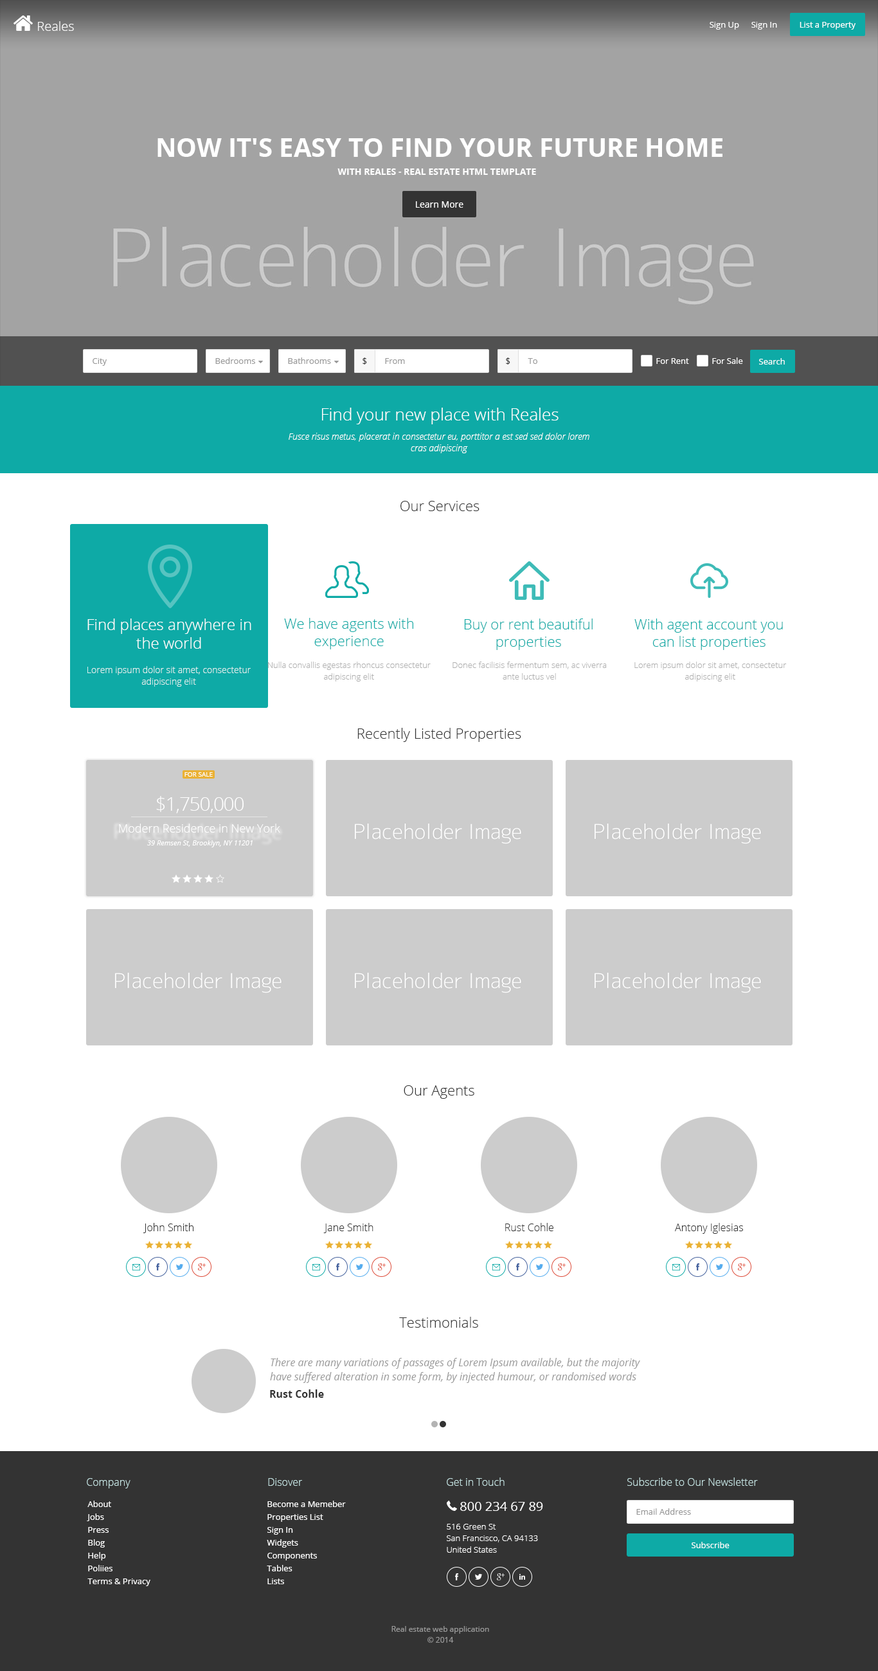
<style>
.page{position:relative;width:878px;height:1671px;background:#ffffff}
.page>*{position:absolute;margin:0}
.t1{font:12.9px "OpenSans-Light";color:#ffffff}
.t2{font:8.4px "OpenSans";color:#ffffff}
.t3{font:25.7px "OpenSans-Bold";color:#ffffff}
.t4{font:9px "OpenSans-Bold";color:#ffffff}
.t5{font:9px "OpenSans";color:#ffffff}
.t6{font:8.4px "OpenSans";color:#999999}
.t7{font:8.4px "OpenSans";color:#333333}
.t8{font:16.7px "OpenSans-Light";color:#ffffff}
.t9{font:9px/11.6px "OpenSansLight-Italic";color:#ffffff}
.t10{font:14.1px "OpenSans-Light";color:#333333}
.t11{font:14.1px "OpenSans-Light";color:#0eaaa6}
.t12{font:15.4px "OpenSans-Light";color:#ffffff}
.t13{font:8.4px/11.6px "OpenSans-Light";color:#999999}
.t14{font:9px/11.6px "OpenSans-Light";color:#def0ef}
.t15{font:6.4px "OpenSans";color:#ffffff}
.t16{font:19.3px "OpenSans-Light";letter-spacing:-0.04em;color:#ffffff}
.t17{font:11.6px "OpenSans-Light";color:#ffffff}
.t18{font:7.1px "OpenSans-Italic";color:#ffffff}
.t19{font:10.3px "OpenSans-Light";color:#333333}
.t20{font:10.3px/14.1px "OpenSans-Italic";color:#999999}
.t21{font:10.3px "OpenSans-Bold";color:#333333}
.t22{font:10.3px "OpenSans-Light";color:#c6e4e3}
.t23{font:8.4px/12.9px "OpenSans";color:#ffffff}
.t24{font:12.9px "OpenSans";color:#ffffff}
.t25{font:8.4px/11.6px "OpenSans-Light";color:#ffffff}
.t26{font:7.7px/10.9px "OpenSans";color:#999999}
</style>
<div class="page">
<p class="t1" style="left:38px;top:21px;width:36px;height:10px">Reales</p>
<p class="t2" style="left:710px;top:22px;width:29px;height:8px">Sign Up</p>
<p class="t2" style="left:752px;top:22px;width:25px;height:8px">Sign In</p>
<p class="t2" style="left:800px;top:22px;width:56px;height:8px">List a Property</p>
<p class="t3" style="left:158px;top:138px;width:565px;height:19px">NOW IT'S EASY TO FIND YOUR FUTURE HOME</p>
<p class="t4" style="left:338px;top:168px;width:198px;height:7px">WITH REALES - REAL ESTATE HTML TEMPLATE</p>
<p class="t5" style="left:416px;top:201px;width:48px;height:7px">Learn More</p>
<p class="t6" style="left:93px;top:358px;width:14px;height:8px">City</p>
<p class="t6" style="left:215px;top:357px;width:40px;height:7px">Bedrooms</p>
<p class="t6" style="left:288px;top:357px;width:43px;height:7px">Bathrooms</p>
<p class="t7" style="left:363px;top:357px;width:4px;height:7px">$</p>
<p class="t6" style="left:385px;top:358px;width:20px;height:6px">From</p>
<p class="t7" style="left:506px;top:357px;width:4px;height:7px">$</p>
<p class="t6" style="left:528px;top:358px;width:9px;height:6px">To</p>
<p class="t2" style="left:656px;top:358px;width:33px;height:6px">For Rent</p>
<p class="t2" style="left:712px;top:357px;width:31px;height:7px">For Sale</p>
<p class="t2" style="left:759px;top:358px;width:26px;height:6px">Search</p>
<p class="t8" style="left:322px;top:408px;width:237px;height:16px">Find your new place with Reales</p>
<p class="t9" style="left:289px;top:433px;width:301px;height:20px;text-align:center">Fusce risus metus, placerat in consectetur eu, porttitor a est sed sed dolor lorem cras adipiscing</p>
<p class="t10" style="left:401px;top:501px;width:79px;height:10px">Our Services</p>
<p class="t11" style="left:284px;top:618px;width:129px;height:31px;text-align:center">We have agents with<br>experience</p>
<p class="t12" style="left:87px;top:618px;width:164px;height:31px;text-align:center">Find places anywhere in<br>the world</p>
<p class="t11" style="left:464px;top:618px;width:129px;height:32px;text-align:center">Buy or rent beautiful<br>properties</p>
<p class="t11" style="left:634px;top:618px;width:149px;height:32px;text-align:center">With agent account you<br>can list properties</p>
<p class="t13" style="left:267px;top:662px;width:164px;height:19px;text-align:center;opacity:0.8">Nulla convallis egestas rhoncus consectetur<br>adipiscing elit</p>
<p class="t13" style="left:453px;top:662px;width:154px;height:18px;text-align:center;opacity:0.8">Donec facilisis fermentum sem, ac viverra<br>ante luctus vel</p>
<p class="t13" style="left:634px;top:662px;width:153px;height:19px;text-align:center;opacity:0.8">Lorem ipsum dolor sit amet, consectetur<br>adipiscing elit</p>
<p class="t14" style="left:87px;top:666px;width:164px;height:21px;text-align:center">Lorem ipsum dolor sit amet, consectetur<br>adipiscing elit</p>
<p class="t10" style="left:357px;top:728px;width:164px;height:14px">Recently Listed Properties</p>
<p class="t15" style="left:184px;top:772px;width:29px;height:5px">FOR SALE</p>
<p class="t16" style="left:156px;top:796px;width:88px;height:17px">$1,750,000</p>
<p class="t17" style="left:119px;top:824px;width:161px;height:9px">Modern Residence in New York</p>
<p class="t18" style="left:147px;top:840px;width:106px;height:7px">39 Remsen St, Brooklyn, NY 11201</p>
<p class="t10" style="left:404px;top:1085px;width:70px;height:14px">Our Agents</p>
<p class="t19" style="left:143px;top:1223px;width:51px;height:10px">John Smith</p>
<p class="t19" style="left:323px;top:1223px;width:51px;height:10px">Jane Smith</p>
<p class="t19" style="left:505px;top:1223px;width:49px;height:8px">Rust Cohle</p>
<p class="t19" style="left:675px;top:1223px;width:68px;height:11px">Antony Iglesias</p>
<p class="t10" style="left:399px;top:1317px;width:79px;height:11px">Testimonials</p>
<p class="t20" style="left:270px;top:1358px;width:370px;height:25px">There are many variations of passages of Lorem Ipsum available, but the majority<br>have suffered alteration in some form, by injected humour, or randomised words</p>
<p class="t21" style="left:270px;top:1389px;width:54px;height:9px">Rust Cohle</p>
<p class="t22" style="left:87px;top:1478px;width:43px;height:10px">Company</p>
<p class="t22" style="left:268px;top:1478px;width:34px;height:8px">Disover</p>
<p class="t22" style="left:447px;top:1477px;width:58px;height:9px">Get in Touch</p>
<p class="t22" style="left:627px;top:1477px;width:131px;height:9px">Subscribe to Our Newsletter</p>
<p class="t23" style="left:87px;top:1500px;width:63px;height:86px">About<br>Jobs<br>Press<br>Blog<br>Help<br>Poliies<br>Terms &amp; Privacy</p>
<p class="t23" style="left:267px;top:1500px;width:79px;height:84px">Become a Memeber<br>Properties List<br>Sign In<br>Widgets<br>Components<br>Tables<br>Lists</p>
<p class="t24" style="left:460px;top:1502px;width:83px;height:9px">800 234 67 89</p>
<p class="t6" style="left:636px;top:1508px;width:55px;height:7px">Email Address</p>
<p class="t25" style="left:447px;top:1524px;width:91px;height:29px">516 Green St<br>San Francisco, CA 94133<br>United States</p>
<p class="t2" style="left:692px;top:1542px;width:38px;height:6px">Subscribe</p>
<p class="t26" style="left:392px;top:1626px;width:97px;height:17px;text-align:center">Real estate web application<br>© 2014</p>
</div>
